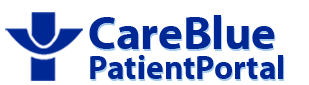
<style>
.page{position:relative;width:309px;height:85px;background:#ffffff}
.page>*{position:absolute;margin:0}
.t1{font:47.2px "Myriad-Bold";color:#002896}
.t2{font:33.3px "Myriad-Bold";color:#002896}
</style>
<div class="page">
<p class="t1" style="left:89px;top:15px;width:186px;height:34px">CareBlue</p>
<p class="t2" style="left:90px;top:55px;width:194px;height:24px">PatientPortal</p>
</div>
